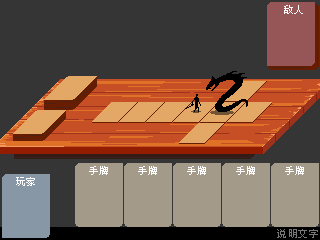
<style>
.page{position:relative;width:320px;height:240px;background:#353535}
.page>*{position:absolute;margin:0}
.t1{font:10px "ZpixEX2";letter-spacing:0.05em;color:#ffffff}
.t2{font:10px "ZpixEX2";letter-spacing:0.05em;color:#777777}
</style>
<div class="page">
<p class="t1" style="left:284px;top:5px;width:19px;height:9px">敌人</p>
<p class="t1" style="left:89px;top:166px;width:19px;height:9px">手牌</p>
<p class="t1" style="left:138px;top:166px;width:19px;height:9px">手牌</p>
<p class="t1" style="left:187px;top:166px;width:19px;height:9px">手牌</p>
<p class="t1" style="left:236px;top:166px;width:19px;height:9px">手牌</p>
<p class="t1" style="left:285px;top:166px;width:19px;height:9px">手牌</p>
<p class="t1" style="left:16px;top:177px;width:19px;height:9px">玩家</p>
<p class="t2" style="left:277px;top:229px;width:41px;height:9px">说明文字</p>
</div>
